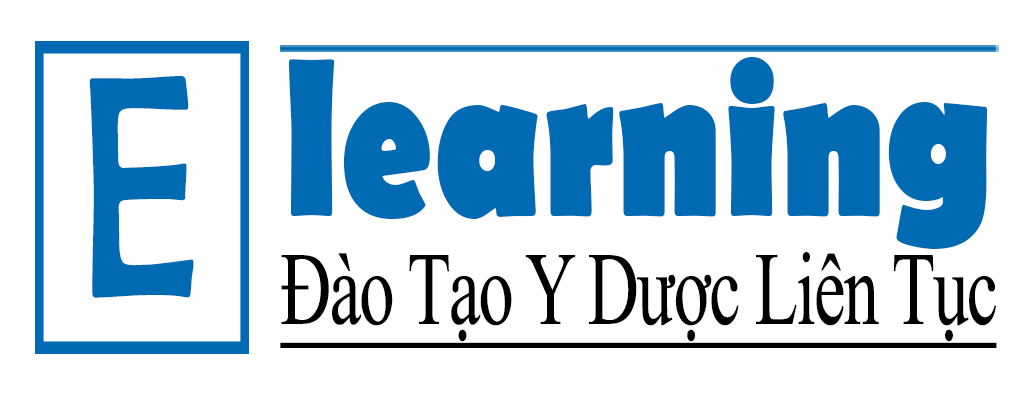
<style>
.page{position:relative;width:1024px;height:400px;background:#ffffff}
.page>*{position:absolute;margin:0}
.t1{font:228.4px "BerlinSansFB-Bold";color:#006ab3;scale:0.76 1}
.t2{font:320px "BerlinSansFB-Reg";color:#006ab3;scale:0.68 1}
.t3{font:103.6px "TimesNewRomanPSMT";letter-spacing:-0.025em;color:#000000;text-decoration:underline;scale:0.68 1}
</style>
<div class="page">
<p class="t1" style="left:289px;top:57px;width:698px;height:192px">learning</p>
<p class="t2" style="left:89px;top:76px;width:105px;height:222px;rotate:-2deg">E</p>
<p class="t3" style="left:280px;top:251px;width:717px;height:97px">Đào Tạo Y Dược Liên Tục</p>
</div>
